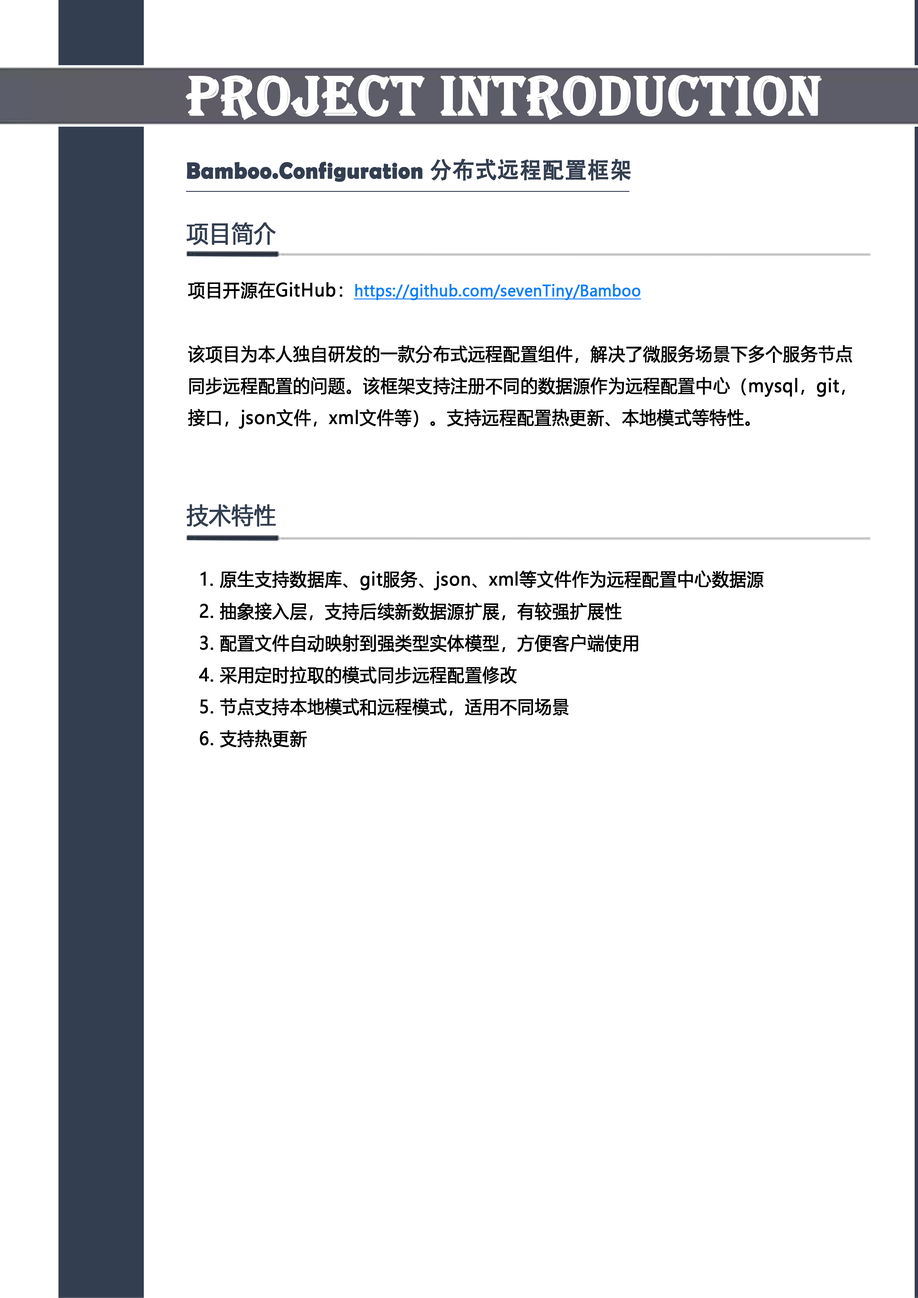
<style>
.page{position:relative;width:918px;height:1298px;background:#ffffff}
.page>*{position:absolute;margin:0}
.t1{font:23px "BerlinSansFBDemi-Bold";letter-spacing:0.005em;color:#333e50;font-weight:bold;scale:0.95 1}
.t2{font:23px "AdobeHeitiStd-Regular";letter-spacing:0.005em;color:#333e50;font-weight:bold;scale:0.95 1}
.t3{font:23px "MicrosoftYaHei";letter-spacing:0.005em;color:#333e50;font-weight:bold;scale:0.95 1}
.t4{font:17.9px/31.9px "MicrosoftYaHei";letter-spacing:0.005em;color:#000000;font-weight:bold;scale:0.95 1}
.t5{font:15.3px/28.1px "MicrosoftYaHei";letter-spacing:0.005em;color:#087ff9;font-weight:bold;text-decoration:underline;scale:0.95 1}
</style>
<div class="page">
<p class="t1" style="left:187px;top:159px;width:444px;height:23px">Bamboo.Configuration <span class="t2">分布式远程配置框架</span></p>
<p class="t3" style="left:186px;top:223px;width:90px;height:22px">项目简介</p>
<p class="t4" style="left:188px;top:282px;width:665px;height:147px">项目开源在GitHub：<span class="t5">https://github.com/sevenTiny/Bamboo<br></span><br>该项目为本人独自研发的一款分布式远程配置组件，解决了微服务场景下多个服务节点同步远程配置的问题。该框架支持注册不同的数据源作为远程配置中心（mysql，git，接口，json文件，xml文件等）。支持远程配置热更新、本地模式等特性。</p>
<p class="t3" style="left:186px;top:504px;width:90px;height:23px">技术特性</p>
<p class="t4" style="left:199px;top:571px;width:565px;height:177px">1. 原生支持数据库、git服务、json、xml等文件作为远程配置中心数据源<br>  2. 抽象接入层，支持后续新数据源扩展，有较强扩展性<br>  3. 配置文件自动映射到强类型实体模型，方便客户端使用<br>  4. 采用定时拉取的模式同步远程配置修改<br>  5. 节点支持本地模式和远程模式，适用不同场景<br>  6. 支持热更新</p>
</div>
